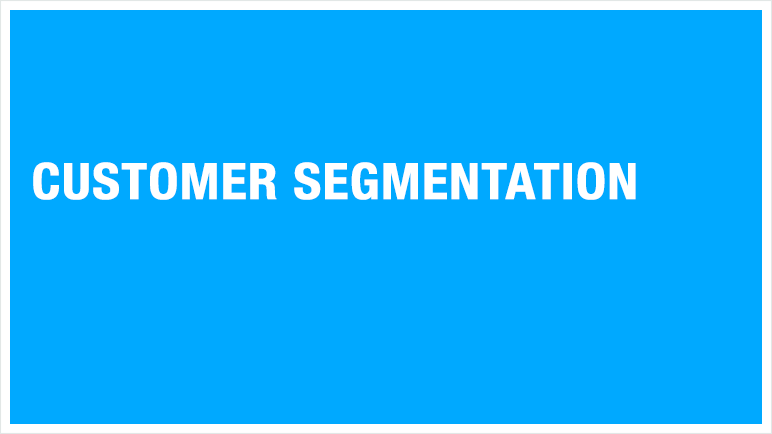
<style>
.page{position:relative;width:772px;height:434px;background:#00a9ff}
.page>*{position:absolute;margin:0}
.t1{font:50px "HelveticaNeue-CondensedBold";color:#ffffff;font-weight:bold;scale:1.07 1}
</style>
<div class="page">
<p class="t1" style="left:33px;top:162px;width:603px;height:38px">CUSTOMER SEGMENTATION</p>
</div>
